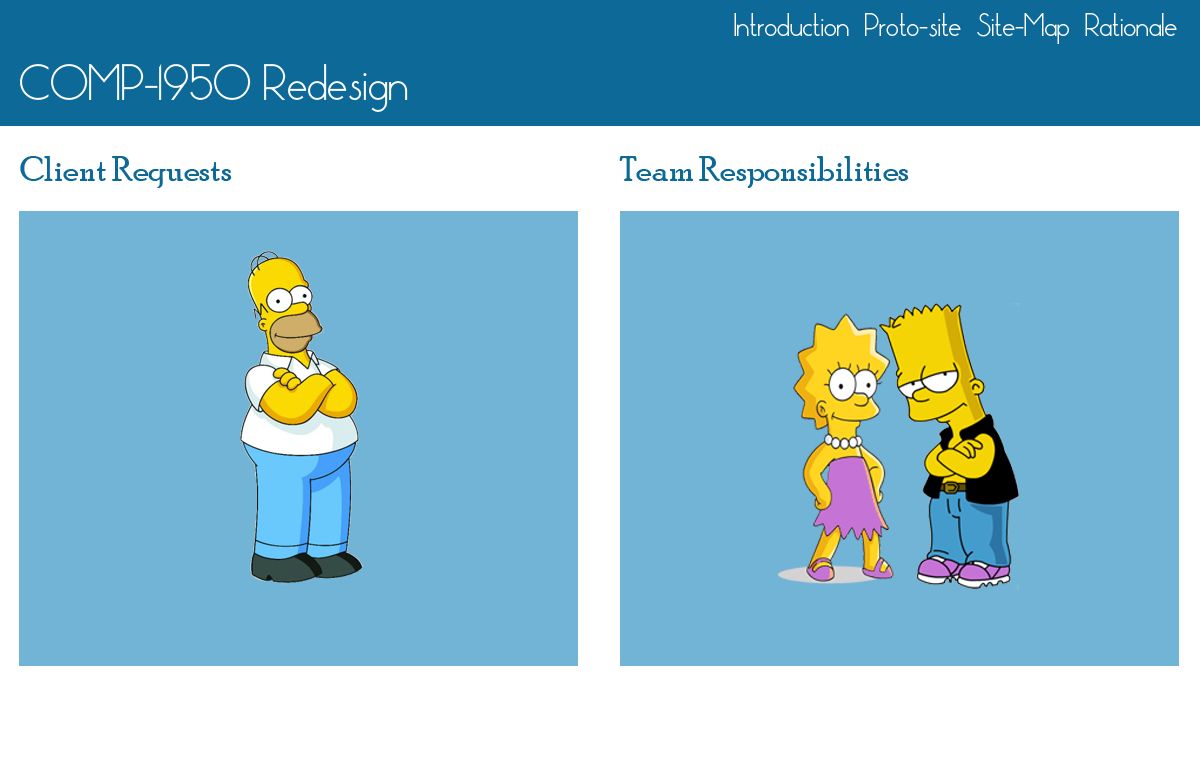
<style>
.page{position:relative;width:1200px;height:768px;background:#72b4d5}
.page>*{position:absolute;margin:0}
.t1{font:30px "Pistara";color:#ffffff}
.t2{font:48px "Pistara";color:#ffffff}
.t3{font:36px "PoorRichard-Regular";color:#0c6998}
</style>
<div class="page">
<p class="t1" style="left:734px;top:13px;width:443px;height:31px">Introduction  Proto-site  Site-Map  Rationale</p>
<p class="t2" style="left:20px;top:64px;width:388px;height:48px">COMP-1950 Redesign</p>
<p class="t3" style="left:20px;top:156px;width:212px;height:32px">Client Requests</p>
<p class="t3" style="left:619px;top:156px;width:290px;height:32px">Team Responsibilities</p>
</div>
